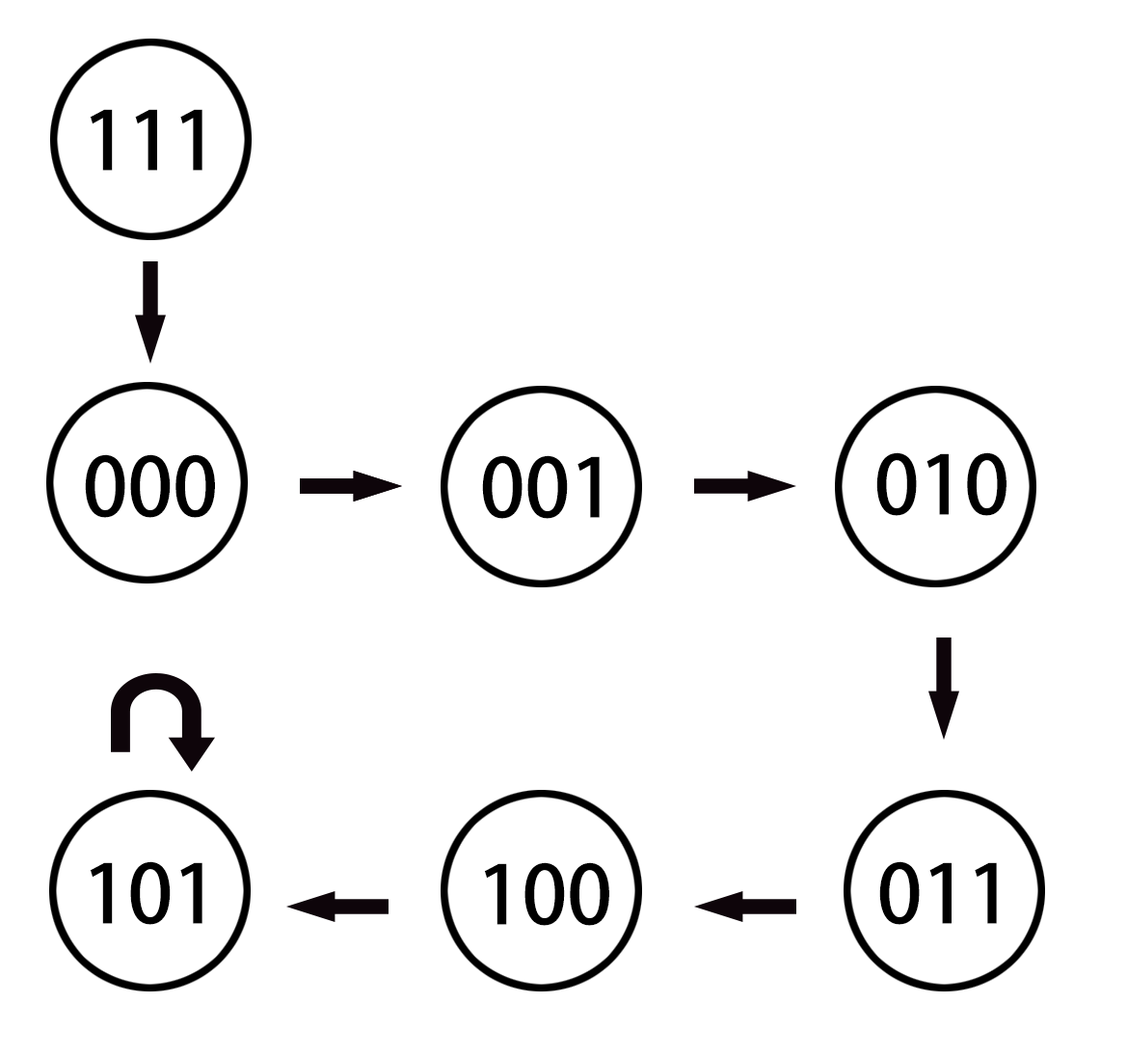
<style>
.page{position:relative;width:1127px;height:1058px;background:#ffffff}
.page>*{position:absolute;margin:0}
.t1{font:80.4px "AdobeHeitiStd-Regular";color:#000000}
</style>
<div class="page">
<p class="t1" style="left:90px;top:109px;width:113px;height:62px">111</p>
<p class="t1" style="left:85px;top:454px;width:130px;height:64px">000</p>
<p class="t1" style="left:482px;top:455px;width:118px;height:64px">001</p>
<p class="t1" style="left:877px;top:452px;width:130px;height:64px">010</p>
<p class="t1" style="left:90px;top:861px;width:113px;height:64px">101</p>
<p class="t1" style="left:484px;top:862px;width:125px;height:64px">100</p>
<p class="t1" style="left:879px;top:861px;width:118px;height:64px">011</p>
</div>
